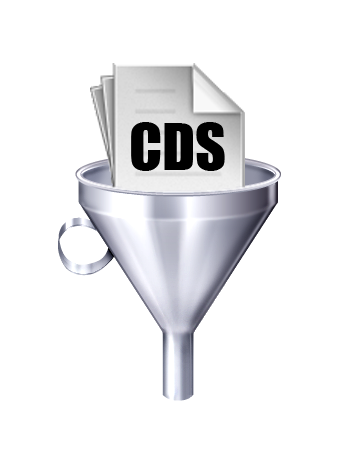
<style>
.page{position:relative;width:346px;height:462px;background:#ffffff}
.page>*{position:absolute;margin:0}
.t1{font:60px "Impact";color:#000000}
</style>
<div class="page">
<p class="t1" style="left:131px;top:122px;width:94px;height:49px">CDS</p>
</div>
